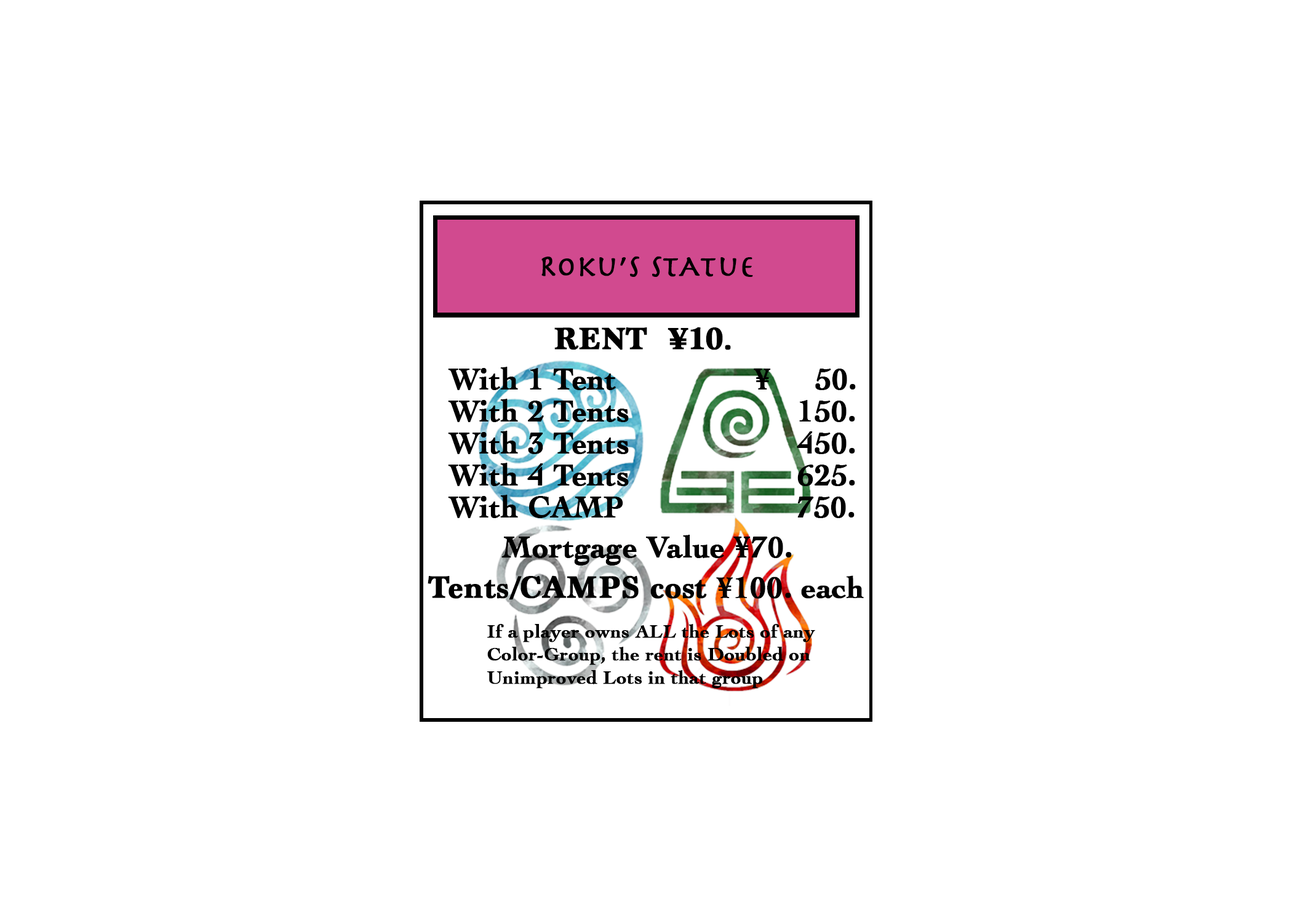
<style>
.page{position:relative;width:1292px;height:923px;background:#ffffff}
.page>*{position:absolute;margin:0}
.t1{font:30.8px "Herculanum";color:#000000;font-weight:bold}
.t2{font:32px "Marion-Bold";color:#000000;font-weight:bold}
.t3{font:30.8px "Cochin-Bold";color:#000000;font-weight:bold}
.t4{font:19.2px "Cochin-Bold";color:#000000;font-weight:bold}
</style>
<div class="page">
<p class="t1" style="left:541px;top:256px;width:212px;height:21px">Roku’s stAtue</p>
<p class="t2" style="left:554px;top:327px;width:177px;height:23px">RENT  ¥10.</p>
<p class="t3" style="left:448px;top:367px;width:408px;height:23px">With 1 Tent               ¥     50.</p>
<p class="t3" style="left:448px;top:399px;width:407px;height:23px">With 2 Tents                   150.</p>
<p class="t3" style="left:448px;top:431px;width:407px;height:23px">With 3 Tents                   450.</p>
<p class="t3" style="left:448px;top:463px;width:407px;height:23px">With 4 Tents                   625.</p>
<p class="t3" style="left:448px;top:495px;width:407px;height:23px">With CAMP                  750.</p>
<p class="t3" style="left:501px;top:535px;width:291px;height:30px">Mortgage Value ¥70.</p>
<p class="t2" style="left:428px;top:575px;width:436px;height:25px">Tents/CAMPS cost <span class="t3">¥100. each</span></p>
<p class="t4" style="left:487px;top:624px;width:328px;height:64px">If a player owns ALL the Lots of any <br>Color-Group, the rent is Doubled on <br>Unimproved Lots in that group</p>
</div>
